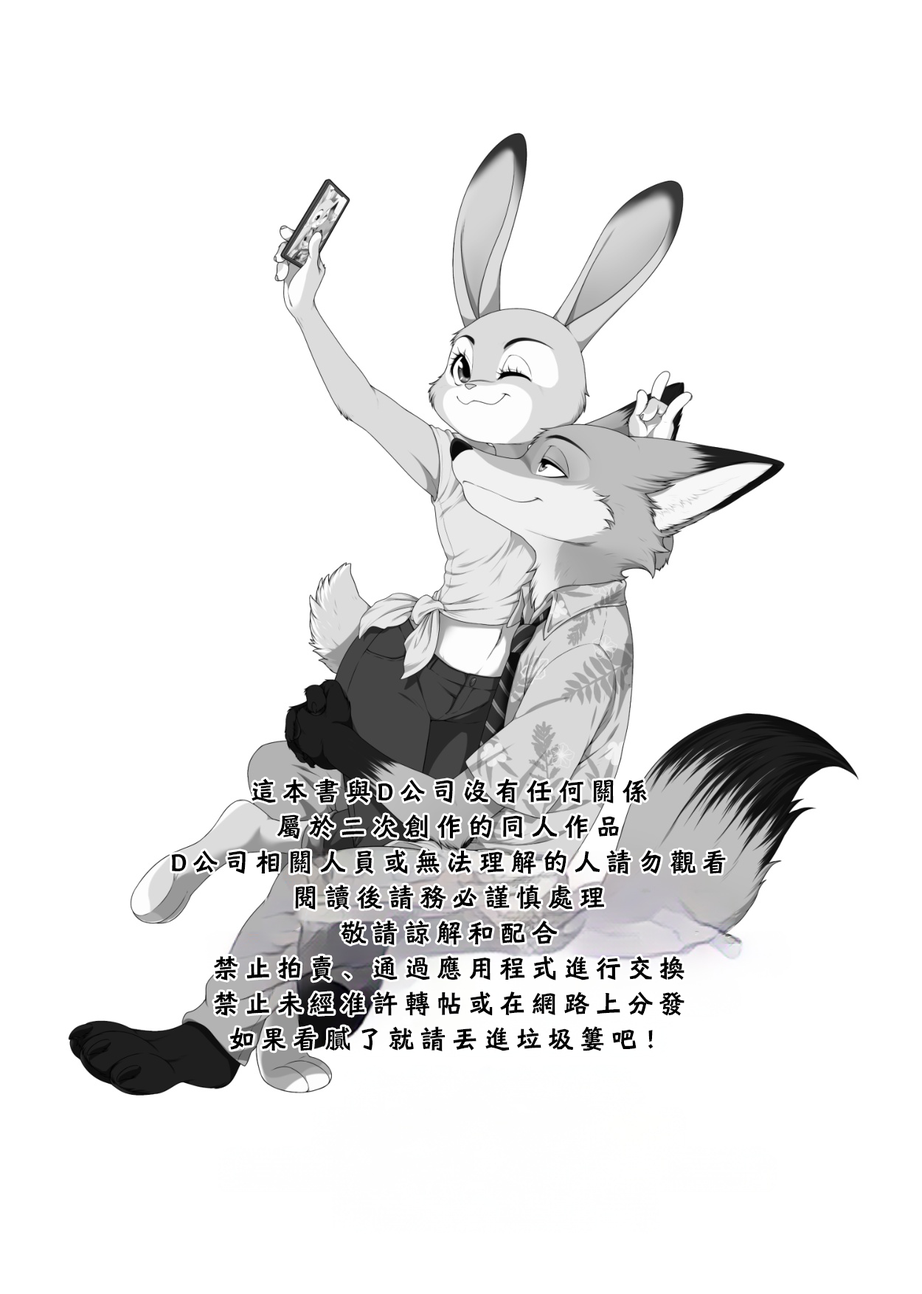
<style>
.page{position:relative;width:922px;height:1294px;background:#ffffff}
.page>*{position:absolute;margin:0}
.t1{font:26.5px/35.4px "HYShiWei75U";letter-spacing:0.2em;color:#000000}
</style>
<div class="page">
<p class="t1" style="left:171px;top:778px;width:555px;height:273px;text-align:center">這本書與D公司沒有任何關係<br>屬於二次創作的同人作品<br>D公司相關人員或無法理解的人請勿觀看<br>閱讀後請務必謹慎處理<br>敬請諒解和配合<br>禁止拍賣、通過應用程式進行交換<br>禁止未經准許轉帖或在網路上分發<br>如果看膩了就請丟進垃圾簍吧！</p>
</div>
